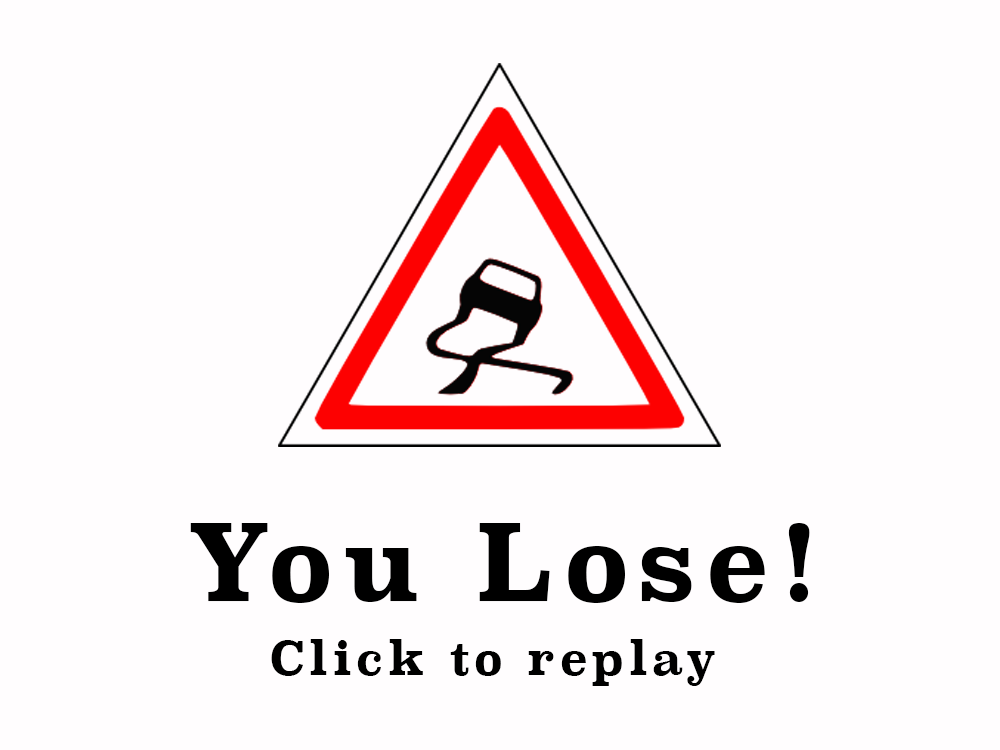
<style>
.page{position:relative;width:1000px;height:750px;background:#fffdfe}
.page>*{position:absolute;margin:0}
.t1{font:103.7px "Superclarendon-Bold";letter-spacing:0.1em;color:#000000;scale:0.97 1}
.t2{font:45.9px "Superclarendon-Bold";letter-spacing:0.1em;color:#000000;scale:0.97 1}
</style>
<div class="page">
<p class="t1" style="left:190px;top:523px;width:620px;height:80px">You Lose!</p>
<p class="t2" style="left:271px;top:639px;width:444px;height:47px">Click to replay</p>
</div>
